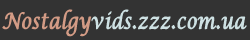
<style>
.page{position:relative;width:250px;height:40px;background:#333333}
.page>*{position:absolute;margin:0}
.t1{font:22px "LucidaCalligraphy-Italic";color:#cee1e3;font-weight:bold;scale:0.8 1}
.t2{font:22px "LucidaCalligraphy-Italic";color:#d39b85;font-weight:bold;scale:0.8 1}
</style>
<div class="page">
<p class="t1" style="left:2px;top:9px;width:245px;height:28px"><span class="t2">Nostalgy</span>vids.zzz.com.ua</p>
</div>
